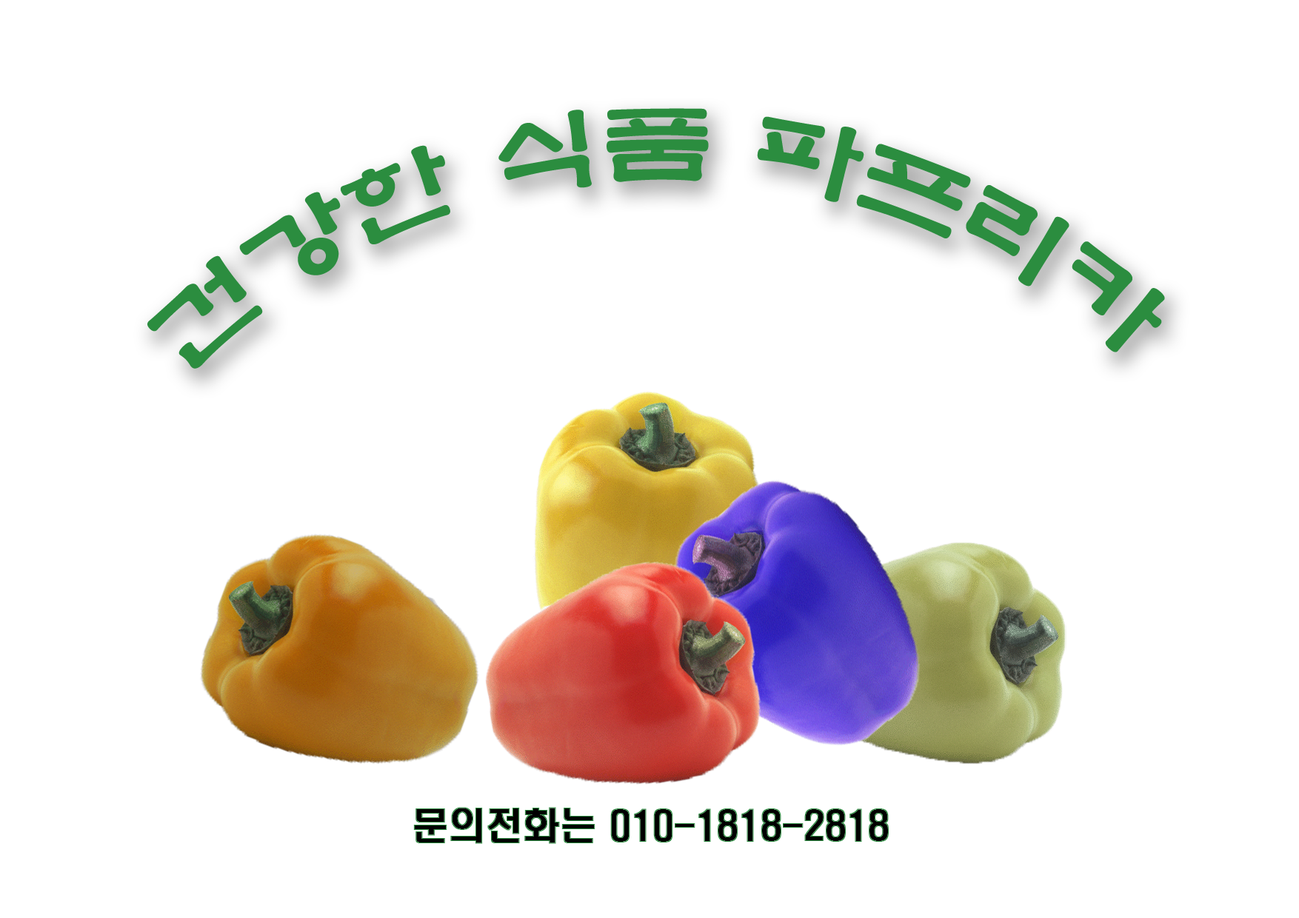
<style>
.page{position:relative;width:1299px;height:918px;background:#ffffff}
.page>*{position:absolute;margin:0}
.t1{font:92.6px "YetR-HM";color:#2b8d3f}
</style>
<div class="page">
<p class="t1" style="left:147px;top:108px;width:1018px;height:261px">건강한 식품 파프리카</p>
</div>
